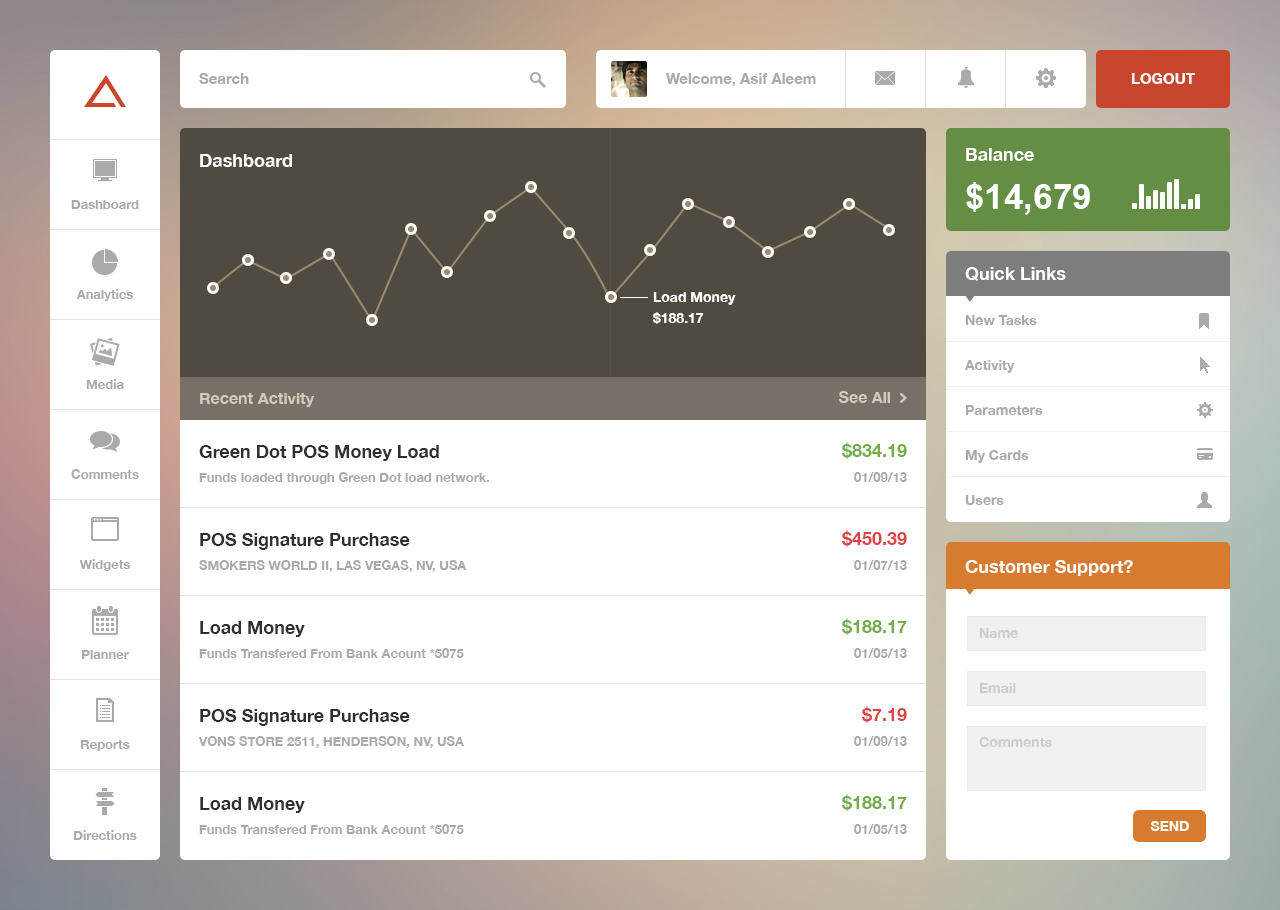
<style>
.page{position:relative;width:1280px;height:910px;background:#ffffff}
.page>*{position:absolute;margin:0}
.t1{font:15px "HelveticaNeue-Bold";color:#aaaaaa}
.t2{font:15px "HelveticaNeue-Bold";color:#ffffff}
.t3{font:18px "HelveticaNeue-Bold";color:#ffffff}
.t4{font:35px "Arial-BoldMT";color:#ffffff}
.t5{font:13px "HelveticaNeue-Bold";color:#aaaaaa}
.t6{font:14px "HelveticaNeue-Bold";color:#ffffff}
.t7{font:14px/45px "HelveticaNeue-Bold";color:#aaaaaa}
.t8{font:16px "HelveticaNeue-Bold";color:#d3cabb}
.t9{font:18px "HelveticaNeue-Bold";color:#2f2f2f}
.t10{font:18px "HelveticaNeue-Bold";color:#71ad49}
.t11{font:13px "HelveticaNeue-Bold";color:#939393}
.t12{font:18px "HelveticaNeue-Bold";color:#dd4343}
.t13{font:14px "HelveticaNeue-Bold";color:#cccccc}
.t14{font:14px "HelveticaNeue-Bold";color:#ffffff;text-transform:uppercase}
</style>
<div class="page">
<p class="t1" style="left:199px;top:73px;width:50px;height:11px">Search</p>
<p class="t1" style="left:666px;top:73px;width:150px;height:13px">Welcome, Asif Aleem</p>
<p class="t2" style="left:1131px;top:73px;width:64px;height:11px">LOGOUT</p>
<p class="t3" style="left:966px;top:148px;width:68px;height:13px">Balance</p>
<p class="t3" style="left:200px;top:154px;width:92px;height:13px">Dashboard</p>
<p class="t4" style="left:966px;top:182px;width:124px;height:33px">$14,679</p>
<p class="t5" style="left:71px;top:200px;width:68px;height:9px">Dashboard</p>
<p class="t3" style="left:965px;top:267px;width:101px;height:14px">Quick Links</p>
<p class="t5" style="left:76px;top:289px;width:57px;height:12px">Analytics</p>
<p class="t6" style="left:653px;top:292px;width:83px;height:13px">Load Money</p>
<p class="t6" style="left:653px;top:312px;width:51px;height:12px">$188.17</p>
<p class="t7" style="left:964px;top:315px;width:79px;height:190px">New Tasks<br>Activity<br>Parameters<br>My Cards<br>Users</p>
<p class="t5" style="left:86px;top:379px;width:38px;height:10px">Media</p>
<p class="t8" style="left:200px;top:393px;width:115px;height:14px">Recent Activity</p>
<p class="t8" style="left:838px;top:391px;width:52px;height:12px">See All</p>
<p class="t9" style="left:199px;top:445px;width:240px;height:16px">Green Dot POS Money Load</p>
<p class="t10" style="left:842px;top:442px;width:65px;height:17px">$834.19</p>
<p class="t5" style="left:71px;top:469px;width:68px;height:10px">Comments</p>
<p class="t11" style="left:199px;top:472px;width:291px;height:12px">Funds loaded through Green Dot load network.</p>
<p class="t11" style="left:854px;top:472px;width:53px;height:10px">01/09/13</p>
<p class="t9" style="left:200px;top:533px;width:210px;height:17px">POS Signature Purchase</p>
<p class="t12" style="left:842px;top:530px;width:65px;height:17px">$450.39</p>
<p class="t5" style="left:79px;top:559px;width:51px;height:12px">Widgets</p>
<p class="t11" style="left:199px;top:560px;width:268px;height:12px">SMOKERS WORLD II, LAS VEGAS, NV, USA</p>
<p class="t11" style="left:854px;top:560px;width:53px;height:10px">01/07/13</p>
<p class="t3" style="left:965px;top:560px;width:168px;height:16px">Customer Support?</p>
<p class="t9" style="left:200px;top:621px;width:105px;height:16px">Load Money</p>
<p class="t10" style="left:842px;top:618px;width:65px;height:17px">$188.17</p>
<p class="t13" style="left:979px;top:628px;width:39px;height:10px">Name</p>
<p class="t5" style="left:82px;top:650px;width:47px;height:9px">Planner</p>
<p class="t11" style="left:199px;top:648px;width:265px;height:10px">Funds Transfered From Bank Acount *5075</p>
<p class="t11" style="left:854px;top:648px;width:53px;height:10px">01/05/13</p>
<p class="t13" style="left:979px;top:683px;width:37px;height:10px">Email</p>
<p class="t9" style="left:200px;top:709px;width:210px;height:17px">POS Signature Purchase</p>
<p class="t12" style="left:862px;top:706px;width:45px;height:17px">$7.19</p>
<p class="t11" style="left:198px;top:736px;width:266px;height:12px">VONS STORE 2511, HENDERSON, NV, USA</p>
<p class="t11" style="left:854px;top:736px;width:53px;height:10px">01/09/13</p>
<p class="t13" style="left:979px;top:737px;width:73px;height:10px">Comments</p>
<p class="t5" style="left:81px;top:740px;width:49px;height:11px">Reports</p>
<p class="t9" style="left:200px;top:797px;width:105px;height:16px">Load Money</p>
<p class="t10" style="left:842px;top:794px;width:65px;height:17px">$188.17</p>
<p class="t14" style="left:1150px;top:821px;width:39px;height:10px">Send</p>
<p class="t5" style="left:74px;top:830px;width:63px;height:10px">Directions</p>
<p class="t11" style="left:199px;top:824px;width:265px;height:10px">Funds Transfered From Bank Acount *5075</p>
<p class="t11" style="left:854px;top:824px;width:53px;height:10px">01/05/13</p>
</div>
